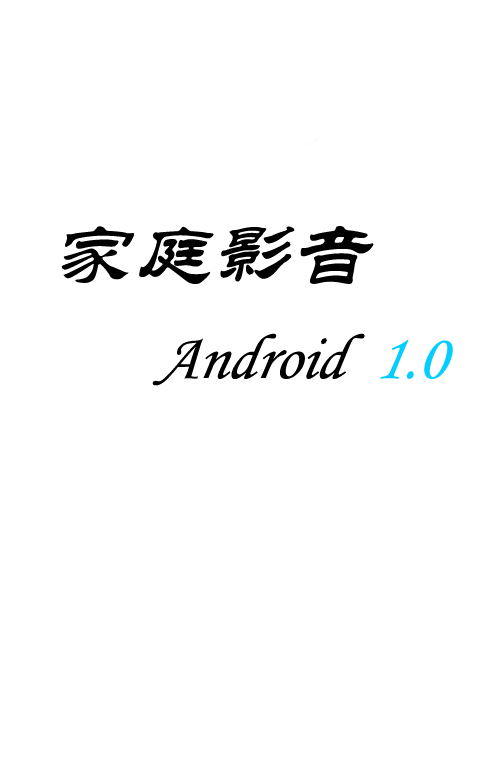
<style>
.page{position:relative;width:480px;height:757px;background:#ffffff}
.page>*{position:absolute;margin:0}
.t1{font:80px "STLiti";color:#000000;font-style:italic}
.t2{font:64px "STLiti";color:#000000;font-style:italic}
.t3{font:64px "STLiti";color:#05cdff;font-style:italic}
</style>
<div class="page">
<p class="t1" style="left:61px;top:226px;width:313px;height:58px">家庭影音</p>
<p class="t2" style="left:152px;top:333px;width:301px;height:53px">Android  <span class="t3">1.0</span></p>
</div>
